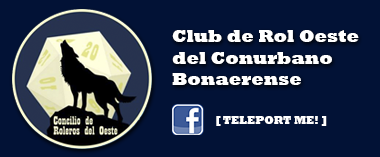
<style>
.page{position:relative;width:380px;height:157px;background:#021236}
.page>*{position:absolute;margin:0}
.t1{font:18px "Rockwell-ExtraBold";color:#ffffff}
.t2{font:11px "Rockwell-ExtraBold";color:#ffffff}
</style>
<div class="page">
<p class="t1" style="left:172px;top:30px;width:187px;height:55px">Club de Rol Oeste<br>del Conurbano<br>Bonaerense</p>
<p class="t2" style="left:216px;top:116px;width:111px;height:10px">[ TELEPORT ME! ]</p>
</div>
